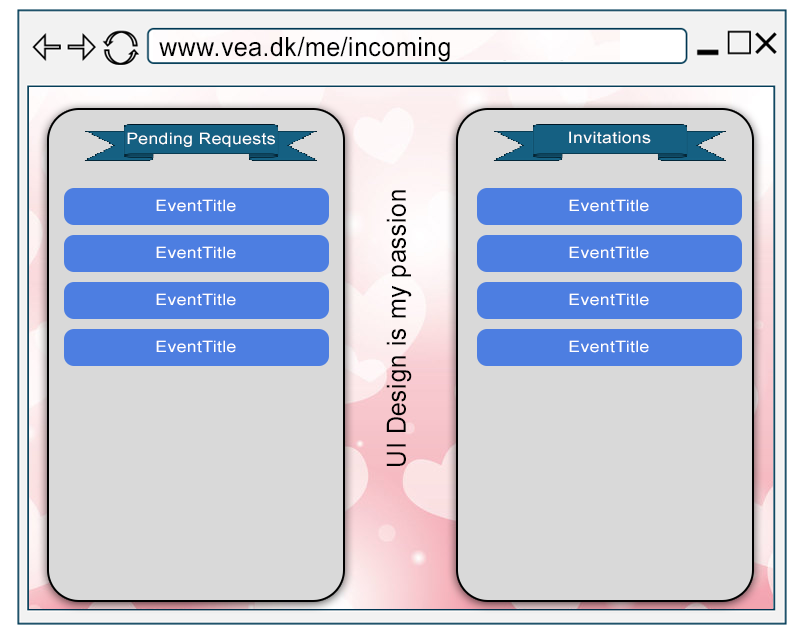
<style>
.page{position:relative;width:797px;height:636px;background:#d9d9d9}
.page>*{position:absolute;margin:0}
.t1{font:26.4px "ArialNarrow";letter-spacing:0.02em;color:#000000;scale:1.15 1}
.t2{font:15.4px "ArialMT";letter-spacing:0.02em;color:#ffffff;scale:1.15 1}
</style>
<div class="page">
<p class="t1" style="left:159px;top:36px;width:291px;height:26px">www.vea.dk/me/incoming</p>
<p class="t2" style="left:127px;top:132px;width:148px;height:15px">Pending Requests</p>
<p class="t2" style="left:569px;top:131px;width:82px;height:13px">Invitations</p>
<p class="t1" style="left:386px;top:190px;width:26px;height:276px;rotate:-90deg">UI Design is my passion</p>
</div>
